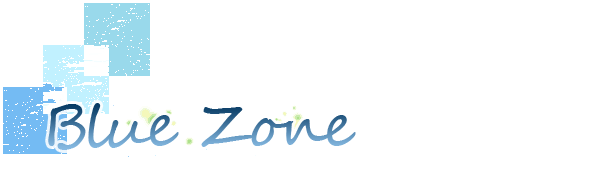
<style>
.page{position:relative;width:600px;height:170px;background:#ffffff}
.page>*{position:absolute;margin:0}
.t1{font:59.4px "SegoeScript"}
</style>
<div class="page">
<p class="t1" style="left:48px;top:103px;width:308px;height:47px">Blue Zone</p>
</div>
